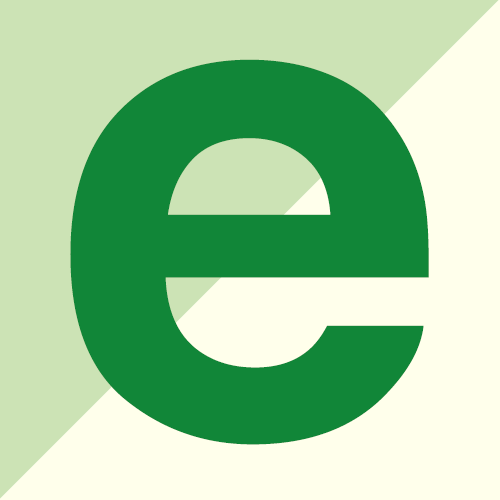
<style>
.page{position:relative;width:500px;height:500px;background:#118638}
.page>*{position:absolute;margin:0}
.t1{font:681.1px "Helvetica-Bold";color:#118638}
</style>
<div class="page">
<p class="t1" style="left:70px;top:59px;width:359px;height:386px">e</p>
</div>
